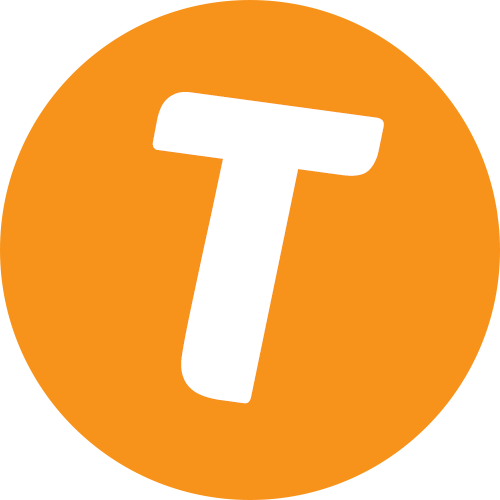
<style>
.page{position:relative;width:500px;height:500px;background:#f7931a}
.page>*{position:absolute;margin:0}
.t1{font:419.8px "PoetsenOne-Regular";color:#ffffff;font-weight:bold}
</style>
<div class="page">
<p class="t1" style="left:152px;top:92px;width:232px;height:312px;rotate:8deg">T</p>
</div>
